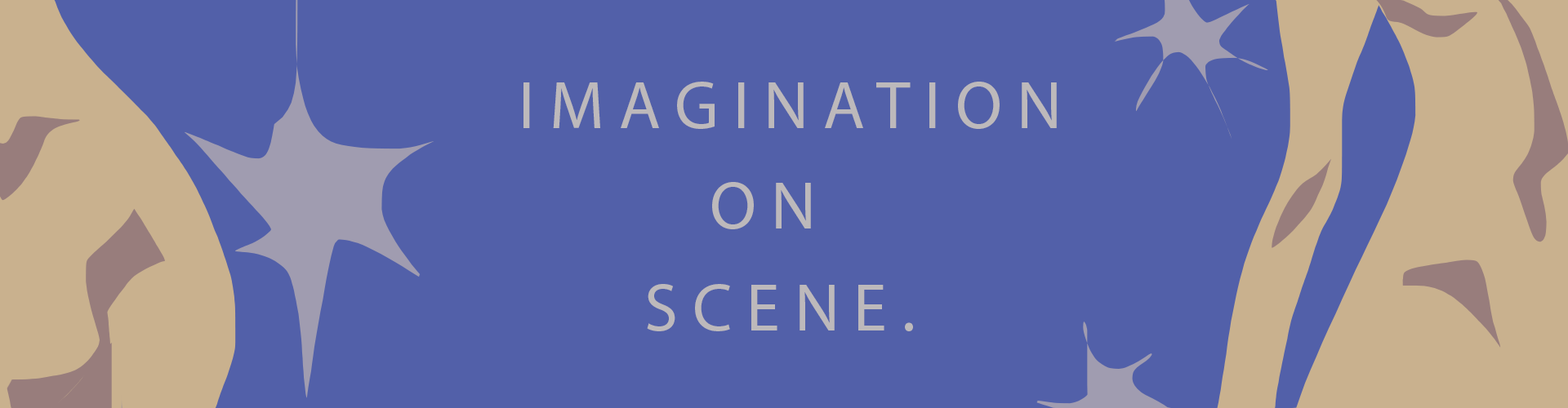
<style>
.page{position:relative;width:1568px;height:408px;background:#5260a9}
.page>*{position:absolute;margin:0}
.t1{font:68.1px "MyriadPro-Regular";color:#bdb9bb}
</style>
<div class="page">
<p class="t1" style="left:523px;top:82px;width:534px;height:47px">I M A G I N A T I O N</p>
<p class="t1" style="left:712px;top:182px;width:99px;height:47px">O N</p>
<p class="t1" style="left:647px;top:284px;width:266px;height:48px">S C E N E .</p>
</div>
